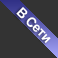
<style>
.page{position:relative;width:58px;height:58px;background:#333333}
.page>*{position:absolute;margin:0}
.t1{font:13.3px "Arial-BoldMT";letter-spacing:-0.025em;color:#ffffff}
</style>
<div class="page">
<p class="t1" style="left:16px;top:7px;width:35px;height:37px;rotate:45deg">В Сети</p>
</div>
